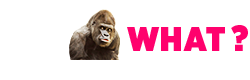
<style>
.page{position:relative;width:250px;height:80px;background:#ffffff}
.page>*{position:absolute;margin:0}
.t1{font:34px "GothamNarrow-Ultra";letter-spacing:0.04em;color:#ff016d}
.t2{font:36px "GothamNarrow-Ultra";letter-spacing:0.04em;color:#ff016d}
</style>
<div class="page">
<p class="t1" style="left:127px;top:27px;width:98px;height:24px">WHAT</p>
<p class="t2" style="left:231px;top:25px;width:17px;height:26px">?</p>
</div>
